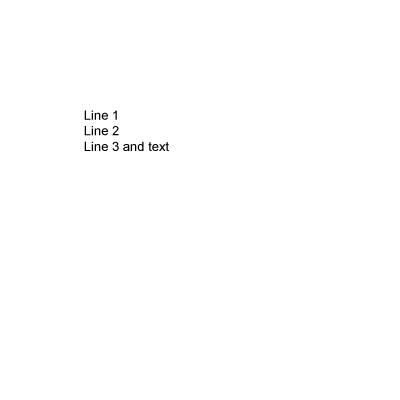
<style>
.page{position:relative;width:400px;height:400px;background:#ffffff}
.page>*{position:absolute;margin:0}
.t1{font:13px "ArialMT";color:#000000}
</style>
<div class="page">
<p class="t1" style="left:84px;top:110px;width:85px;height:41px">Line 1<br>Line 2<br>Line 3 and text</p>
</div>
